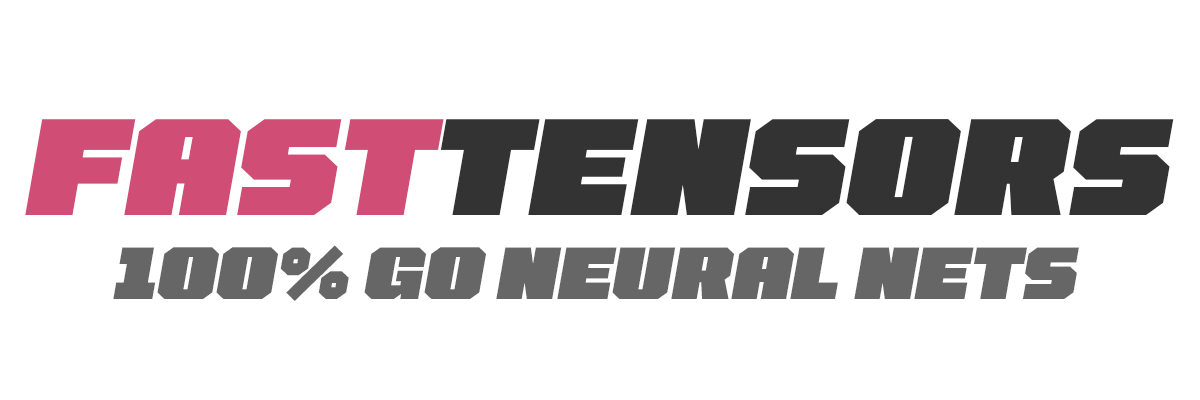
<style>
.page{position:relative;width:1200px;height:400px;background:#ffffff}
.page>*{position:absolute;margin:0}
.t1{font:70px "Tomorrow-BlackItalic";color:#666666}
.t2{font:130px "Tomorrow-BlackItalic";color:#d04d75}
.t3{font:130px "Tomorrow-BlackItalic";color:#333333}
</style>
<div class="page">
<p class="t1" style="left:25px;top:119px;width:1149px;height:182px;text-align:center"><span class="t2">FAST</span><span class="t3">TENSORS<br></span>100% GO NEURAL NETS</p>
</div>
